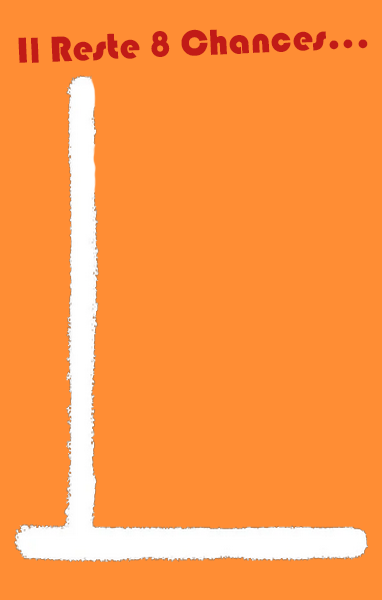
<style>
.page{position:relative;width:382px;height:600px;background:#ff8d34}
.page>*{position:absolute;margin:0}
.t1{font:37.6px "Bauhaus93";color:#c11b17}
</style>
<div class="page">
<p class="t1" style="left:18px;top:29px;width:350px;height:34px;rotate:-3deg">Il Reste 8 Chances...</p>
</div>
